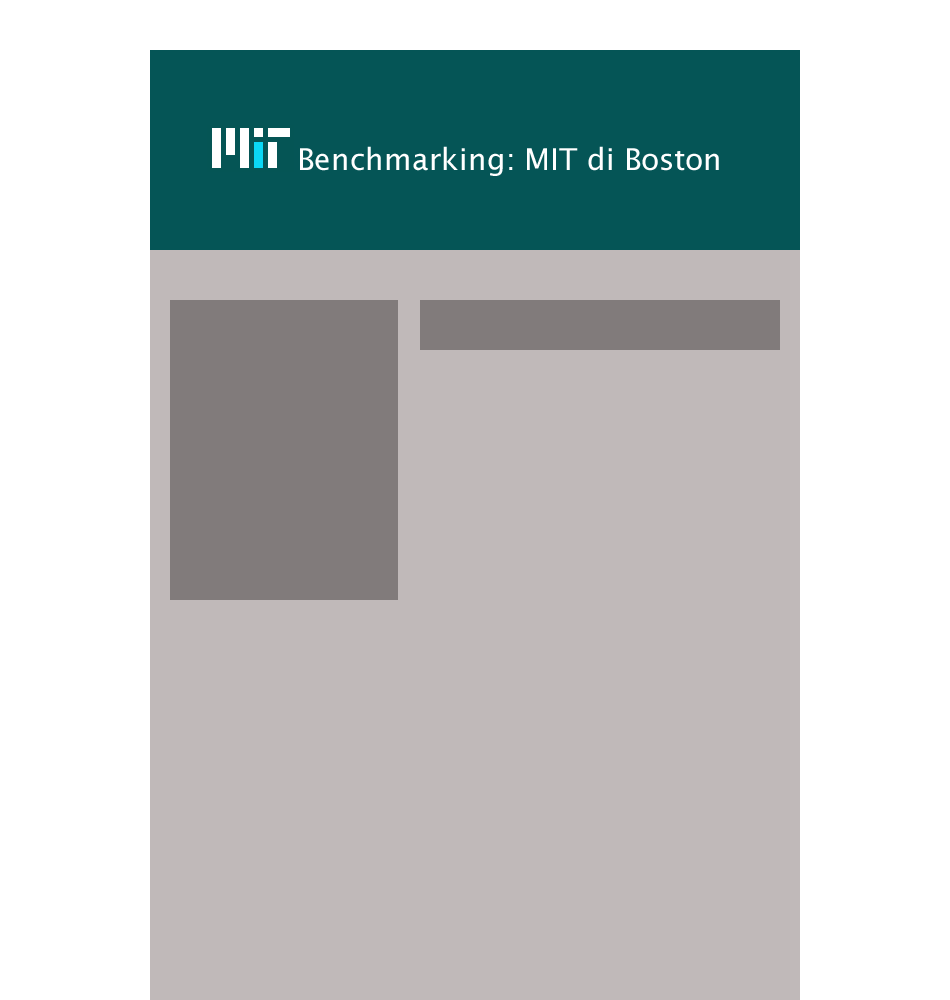
<style>
.page{position:relative;width:950px;height:1000px;background:#c0b9b9}
.page>*{position:absolute;margin:0}
.t1{font:30px "LucidaSans";color:#ffffff}
</style>
<div class="page">
<p class="t1" style="left:300px;top:146px;width:419px;height:30px">Benchmarking: MIT di Boston</p>
</div>
